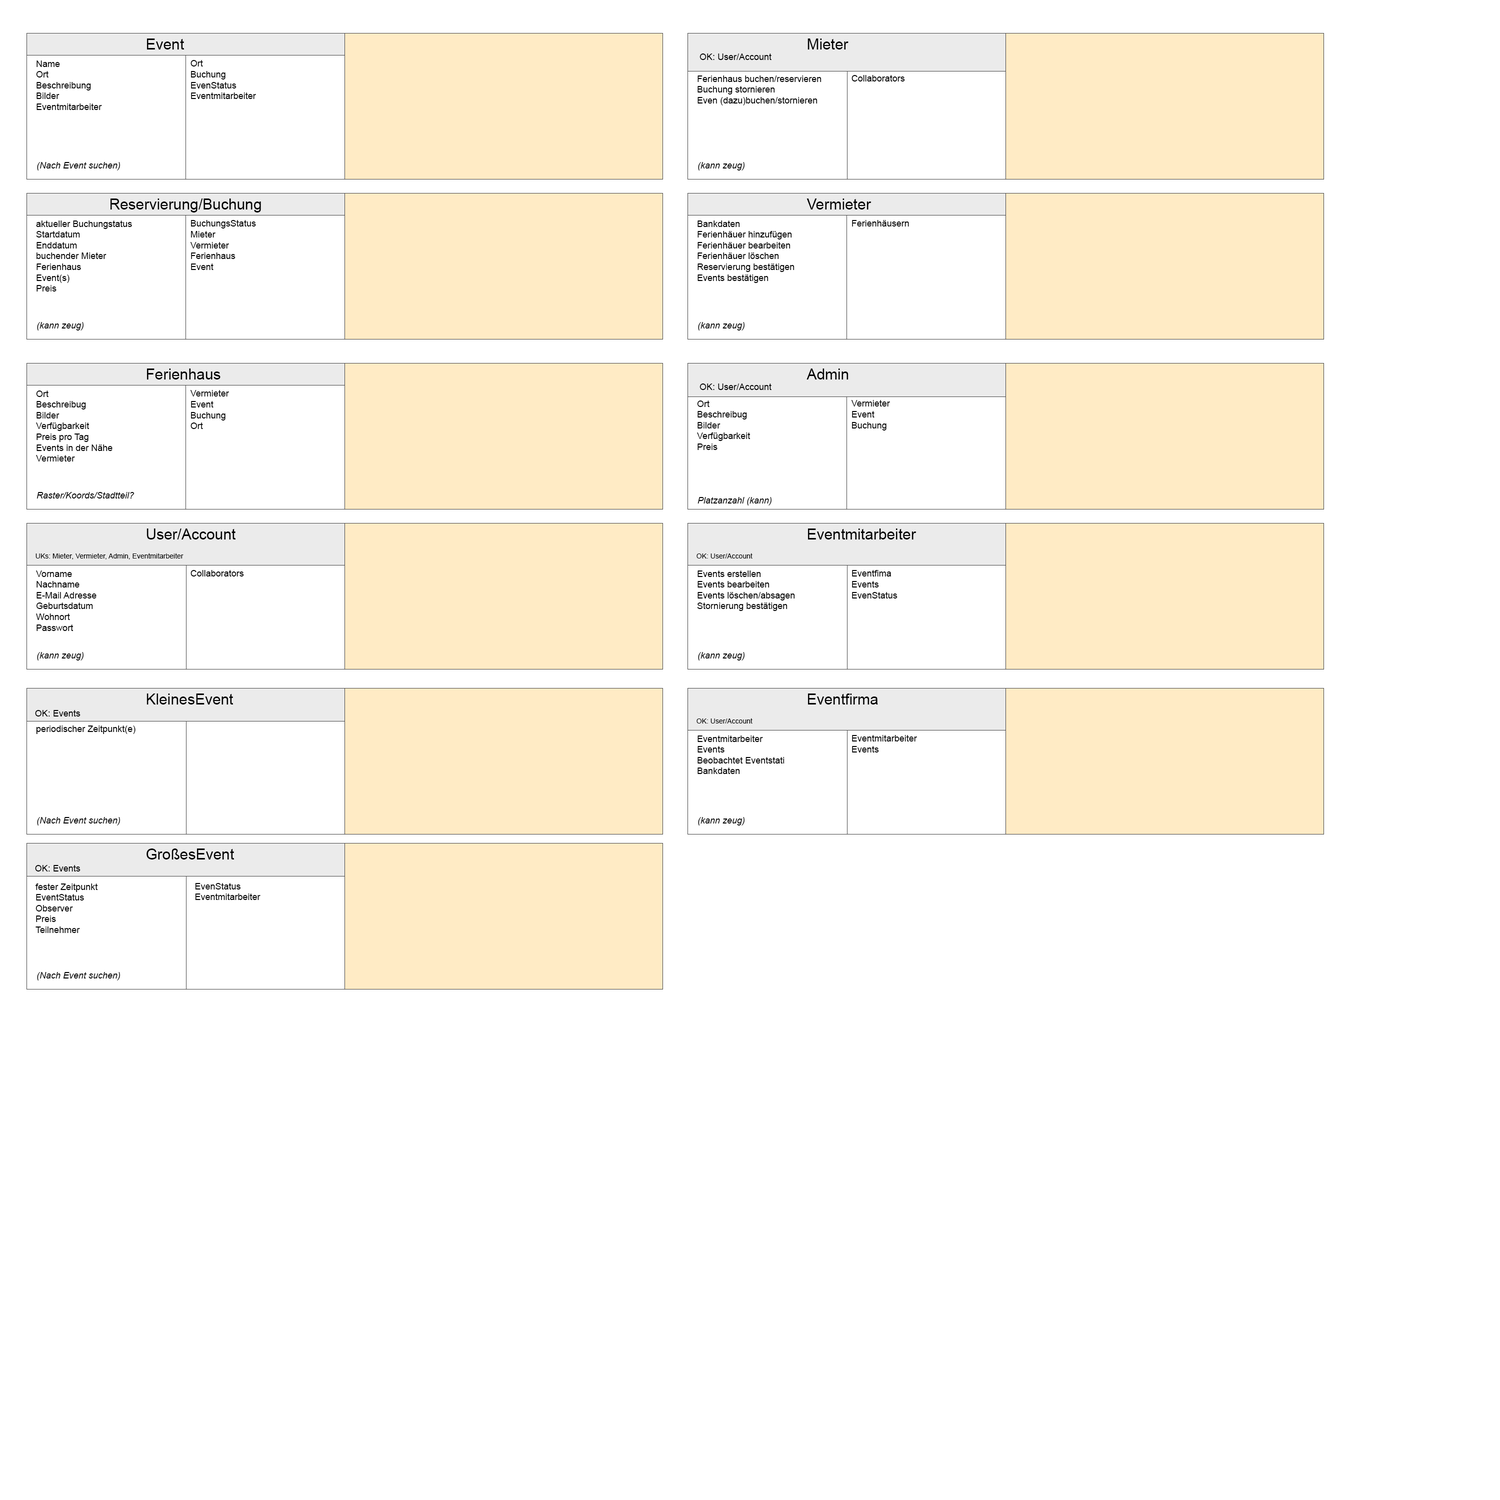
<style>
.page{position:relative;width:1500px;height:1500px;background:#ffffff}
.page>*{position:absolute;margin:0}
.t1{font:15px "ArialMT";color:#000000}
.t2{font:9px "ArialMT";color:#000000}
.t3{font:9px "Arial-ItalicMT";color:#000000}
.t4{font:7px "ArialMT";color:#000000}
</style>
<div class="page">
<p class="t1" style="left:147px;top:38px;width:37px;height:12px">Event</p>
<p class="t1" style="left:808px;top:38px;width:40px;height:12px">Mieter</p>
<p class="t2" style="left:700px;top:54px;width:72px;height:6px">OK: User/Account</p>
<p class="t2" style="left:36px;top:60px;width:66px;height:50px">Name<br>Ort<br>Beschreibung<br>Bilder<br>Eventmitarbeiter</p>
<p class="t2" style="left:190px;top:60px;width:66px;height:39px">Ort<br>Buchung<br>EvenStatus<br>Eventmitarbeiter</p>
<p class="t2" style="left:698px;top:76px;width:124px;height:30px">Ferienhaus buchen/reservieren<br>Buchung stornieren<br>Even (dazu)buchen/stornieren</p>
<p class="t2" style="left:852px;top:75px;width:53px;height:7px">Collaborators</p>
<p class="t3" style="left:37px;top:162px;width:83px;height:8px">(Nach Event suchen)</p>
<p class="t3" style="left:698px;top:162px;width:46px;height:8px">(kann zeug)</p>
<p class="t1" style="left:110px;top:198px;width:151px;height:14px">Reservierung/Buchung</p>
<p class="t1" style="left:806px;top:198px;width:66px;height:12px">Vermieter</p>
<p class="t2" style="left:36px;top:220px;width:96px;height:72px">aktueller Buchungstatus<br>Startdatum<br>Enddatum<br>buchender Mieter<br>Ferienhaus<br>Event(s)<br>Preis</p>
<p class="t2" style="left:190px;top:220px;width:66px;height:50px">BuchungsStatus<br>Mieter<br>Vermieter<br>Ferienhaus<br>Event</p>
<p class="t2" style="left:698px;top:220px;width:96px;height:63px">Bankdaten<br>Ferienhäuer hinzufügen<br>Ferienhäuer bearbeiten<br>Ferienhäuer löschen<br>Reservierung bestätigen<br>Events bestätigen</p>
<p class="t2" style="left:852px;top:220px;width:57px;height:6px">Ferienhäusern</p>
<p class="t3" style="left:37px;top:322px;width:47px;height:8px">(kann zeug)</p>
<p class="t3" style="left:698px;top:322px;width:46px;height:8px">(kann zeug)</p>
<p class="t1" style="left:147px;top:368px;width:73px;height:12px">Ferienhaus</p>
<p class="t1" style="left:806px;top:368px;width:42px;height:12px">Admin</p>
<p class="t2" style="left:190px;top:390px;width:39px;height:39px">Vermieter<br>Event<br>Buchung<br>Ort</p>
<p class="t2" style="left:700px;top:384px;width:72px;height:6px">OK: User/Account</p>
<p class="t2" style="left:36px;top:390px;width:76px;height:72px">Ort<br>Beschreibug<br>Bilder<br>Verfügbarkeit<br>Preis pro Tag<br>Events in der Nähe<br>Vermieter</p>
<p class="t2" style="left:697px;top:400px;width:53px;height:50px">Ort<br>Beschreibug<br>Bilder<br>Verfügbarkeit<br>Preis</p>
<p class="t2" style="left:851px;top:400px;width:39px;height:30px">Vermieter<br>Event<br>Buchung</p>
<p class="t3" style="left:36px;top:492px;width:98px;height:6px">Raster/Koords/Stadtteil?</p>
<p class="t3" style="left:698px;top:497px;width:74px;height:9px">Platzanzahl (kann)</p>
<p class="t1" style="left:146px;top:528px;width:90px;height:12px">User/Account</p>
<p class="t1" style="left:808px;top:528px;width:108px;height:12px">Eventmitarbeiter</p>
<p class="t4" style="left:36px;top:553px;width:148px;height:7px">UKs: Mieter, Vermieter, Admin, Eventmitarbeiter</p>
<p class="t4" style="left:696px;top:553px;width:56px;height:5px">OK: User/Account</p>
<p class="t2" style="left:36px;top:570px;width:60px;height:61px">Vorname<br>Nachname<br>E-Mail Adresse<br>Geburtsdatum<br>Wohnort<br>Passwort</p>
<p class="t2" style="left:190px;top:570px;width:54px;height:6px">Collaborators</p>
<p class="t2" style="left:697px;top:570px;width:98px;height:41px">Events erstellen<br>Events bearbeiten<br>Events löschen/absagen<br>Stornierung bestätigen</p>
<p class="t2" style="left:852px;top:570px;width:46px;height:28px">Eventfima<br>Events<br>EvenStatus</p>
<p class="t3" style="left:37px;top:652px;width:47px;height:8px">(kann zeug)</p>
<p class="t3" style="left:698px;top:652px;width:46px;height:8px">(kann zeug)</p>
<p class="t1" style="left:146px;top:694px;width:87px;height:10px">KleinesEvent</p>
<p class="t1" style="left:808px;top:694px;width:70px;height:10px">Eventfirma</p>
<p class="t2" style="left:35px;top:710px;width:45px;height:6px">OK: Events</p>
<p class="t2" style="left:36px;top:726px;width:100px;height:8px">periodischer Zeitpunkt(e)</p>
<p class="t4" style="left:696px;top:718px;width:56px;height:6px">OK: User/Account</p>
<p class="t2" style="left:698px;top:736px;width:86px;height:38px">Eventmitarbeiter<br>Events<br>Beobachtet Eventstati<br>Bankdaten</p>
<p class="t2" style="left:852px;top:735px;width:65px;height:17px">Eventmitarbeiter<br>Events</p>
<p class="t3" style="left:37px;top:817px;width:83px;height:9px">(Nach Event suchen)</p>
<p class="t3" style="left:698px;top:817px;width:46px;height:9px">(kann zeug)</p>
<p class="t1" style="left:146px;top:848px;width:88px;height:12px">GroßesEvent</p>
<p class="t2" style="left:35px;top:865px;width:45px;height:7px">OK: Events</p>
<p class="t2" style="left:36px;top:884px;width:62px;height:49px">fester Zeitpunkt<br>EventStatus<br>Observer<br>Preis<br>Teilnehmer</p>
<p class="t2" style="left:195px;top:883px;width:65px;height:17px">EvenStatus<br>Eventmitarbeiter</p>
<p class="t3" style="left:37px;top:972px;width:83px;height:8px">(Nach Event suchen)</p>
</div>
